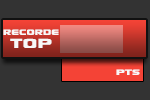
<style>
.page{position:relative;width:150px;height:100px;background:#333333}
.page>*{position:absolute;margin:0}
.t1{font:14.4px "Xscale";color:#f8f8f8;scale:0.95 1}
.t2{font:25px "Xscale";color:#f8f8f8}
.t3{font:14.4px "Xscale";color:#f8f8f8}
</style>
<div class="page">
<p class="t1" style="left:3px;top:29px;width:56px;height:6px">recorde</p>
<p class="t2" style="left:10px;top:38px;width:42px;height:10px">top</p>
<p class="t3" style="left:116px;top:69px;width:24px;height:6px">pts</p>
</div>
